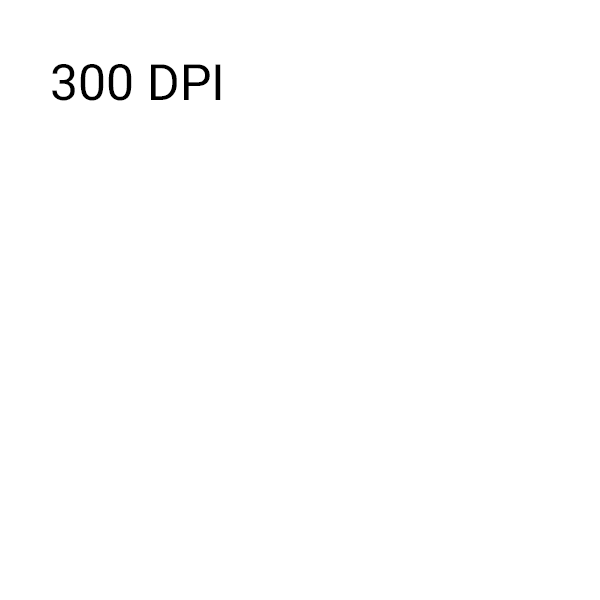
<style>
.page{position:relative;width:600px;height:600px;background:#ffffff}
.page>*{position:absolute;margin:0}
.t1{font:50px "Roboto-Regular";color:#000000}
</style>
<div class="page">
<p class="t1" style="left:52px;top:64px;width:169px;height:37px">300 DPI</p>
</div>
